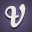
<style>
.page{position:relative;width:32px;height:32px}
.page>*{position:absolute;margin:0}
.t1{font:29.8px "OleoScriptSwashCaps-Regular";color:#e8e8e8;scale:0.93 1}
</style>
<div class="page">
<p class="t1" style="left:5px;top:4px;width:21px;height:24px">V</p>
</div>
